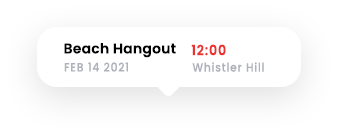
<style>
.page{position:relative;width:339px;height:135px;background:#ffffff}
.page>*{position:absolute;margin:0}
.t1{font:14px "Poppins-SemiBold";letter-spacing:0.015em;color:#000000}
.t2{font:14px "Poppins-SemiBold";letter-spacing:0.075em;color:#ea3232;scale:0.89 1}
.t3{font:12px "Poppins-Medium";letter-spacing:0.075em;color:#adb1b9;scale:0.89 1}
</style>
<div class="page">
<p class="t1" style="left:64px;top:43px;width:112px;height:15px">Beach Hangout</p>
<p class="t2" style="left:191px;top:44px;width:35px;height:12px">12:00</p>
<p class="t3" style="left:64px;top:62px;width:64px;height:10px">FEB 14 2021</p>
<p class="t3" style="left:192px;top:62px;width:72px;height:10px">Whistler Hill</p>
</div>
